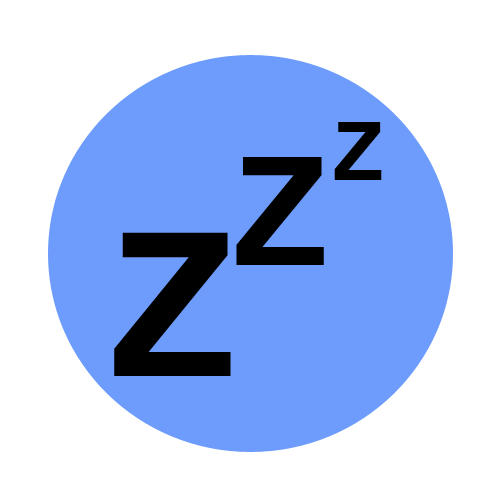
<style>
.page{position:relative;width:500px;height:500px;background:#ffffff}
.page>*{position:absolute;margin:0}
.t1{font:80px "Arial-BoldMT";color:#000000}
.t2{font:150px "Arial-BoldMT";color:#000000}
.t3{font:200px "Arial-BoldMT";color:#000000}
</style>
<div class="page">
<p class="t1" style="left:334px;top:122px;width:48px;height:58px">Z</p>
<p class="t2" style="left:236px;top:157px;width:88px;height:108px">Z</p>
<p class="t3" style="left:114px;top:232px;width:117px;height:144px">Z</p>
</div>
